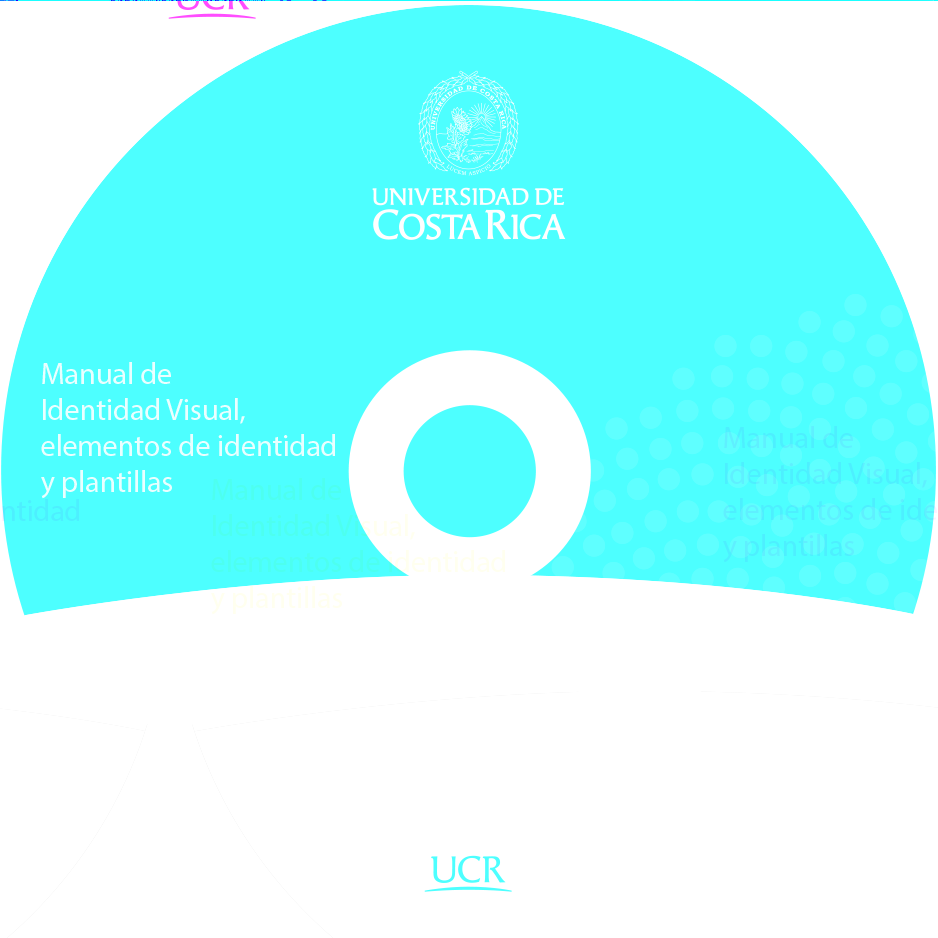
<style>
.page{position:relative;width:938px;height:938px;background:#ffffff}
.page>*{position:absolute;margin:0}
.t1{font:30px "MyriadPro-Regular";color:#eaefef}
</style>
<div class="page">
<p class="t1" style="left:41px;top:361px;width:294px;height:137px">Manual de <br>Identidad Visual, <br>elementos de identidad<br>y plantillas</p>
</div>
